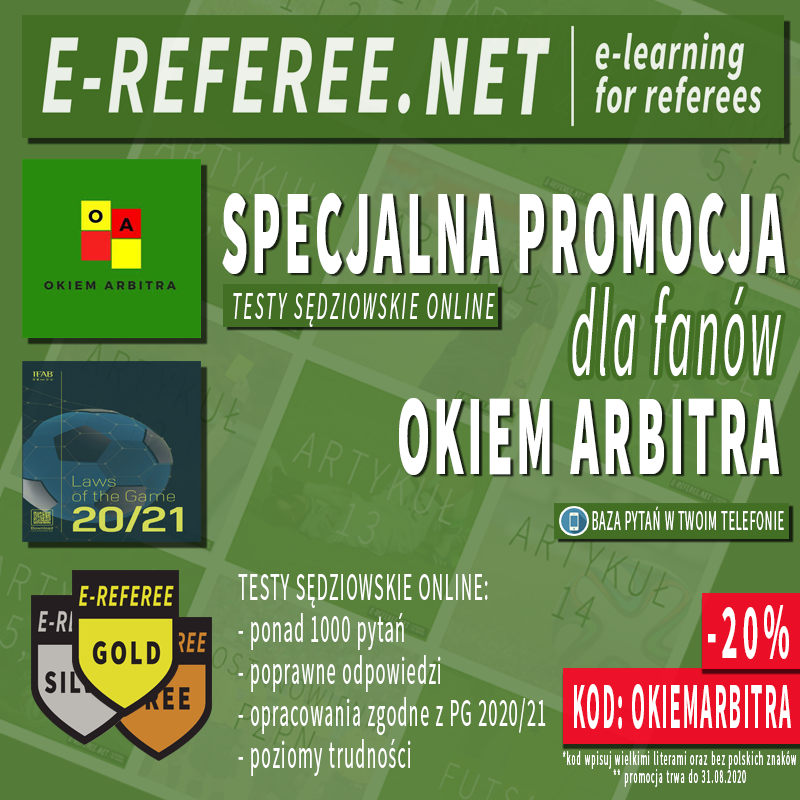
<style>
.page{position:relative;width:800px;height:800px}
.page>*{position:absolute;margin:0}
.t1{font:120.3px "SourceSansPro-Black";letter-spacing:0.08em;color:#ffffff;scale:0.39 1}
.t2{font:92.1px "SourceSansPro-Black";letter-spacing:0.08em;color:#ffffff;scale:0.45 1}
.t3{font:92.1px "SourceSansPro-It";letter-spacing:0.08em;color:#ffffff;scale:0.45 1}
.t4{font:39.5px "SourceSansPro-It";letter-spacing:0.14em;color:#ffffff;scale:0.45 1}
.t5{font:123.6px "SourceSansPro-It";letter-spacing:0.08em;color:#ffffff;scale:0.36 1}
.t6{font:113.8px "SourceSansPro-Black";letter-spacing:0.08em;color:#ffffff;scale:0.42 1}
.t7{font:28.4px "SourceSansPro-Regular";letter-spacing:0.08em;color:#ffffff;scale:0.42 1}
.t8{font:39.5px/42px "SourceSansPro-Regular";letter-spacing:0.08em;color:#ffffff;scale:0.45 1}
.t9{font:79px "SourceSansPro-Bold";letter-spacing:0.16em;color:#ffffff;scale:0.39 1}
.t10{font:65.8px "SourceSansPro-Bold";letter-spacing:0.08em;color:#ffffff;scale:0.32 1}
.t11{font:19.7px "SourceSansPro-Regular";letter-spacing:0.16em;color:#ffffff;scale:0.38 1}
.t12{font:19.7px "SourceSansPro-Regular";letter-spacing:0.16em;color:#ffffff;scale:0.37 1}
</style>
<div class="page">
<p class="t1" style="left:222px;top:193px;width:563px;height:81px">SPECJALNA PROMOCJA<span class="t2"> <br></span><span class="t3"></span></p>
<p class="t4" style="left:233px;top:293px;width:262px;height:34px">TESTY SĘDZIOWSKIE ONLINE</p>
<p class="t5" style="left:572px;top:285px;width:209px;height:92px">dla fanów</p>
<p class="t6" style="left:399px;top:398px;width:380px;height:77px">OKIEM ARBITRA</p>
<p class="t7" style="left:592px;top:506px;width:192px;height:24px">BAZA PYTAŃ W TWOIM TELEFONIE</p>
<p class="t8" style="left:238px;top:574px;width:308px;height:202px">TESTY SĘDZIOWSKIE ONLINE:<br>- ponad 1000 pytań <br>- poprawne odpowiedzi <br>- opracowania zgodne z PG 2020/21<br>- poziomy trudności</p>
<p class="t9" style="left:708px;top:605px;width:81px;height:54px">-20%</p>
<p class="t10" style="left:574px;top:684px;width:217px;height:45px">KOD: OKIEMARBITRA</p>
<p class="t11" style="left:563px;top:751px;width:234px;height:18px">*kod wpisuj wielkimi literami oraz bez polskich <span class="t12">znaków</span></p>
<p class="t11" style="left:613px;top:769px;width:133px;height:18px">** promocja trwa do 31.08.2020</p>
</div>
